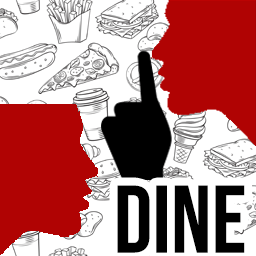
<style>
.page{position:relative;width:256px;height:256px;background:#b00303}
.page>*{position:absolute;margin:0}
.t1{font:95.5px "BebasNeue-Regular";color:#000000}
</style>
<div class="page">
<p class="t1" style="left:117px;top:185px;width:128px;height:68px">dine</p>
</div>
